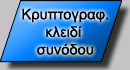
<style>
.page{position:relative;width:130px;height:70px}
.page>*{position:absolute;margin:0}
.t1{font:14.7px "ArialMT";color:#000000}
</style>
<div class="page">
<p class="t1" style="left:22px;top:8px;width:86px;height:47px;text-align:center">Κρυπτογραφ.<br>κλειδί <br>συνόδου</p>
</div>
